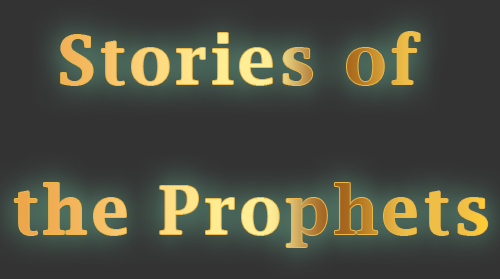
<style>
.page{position:relative;width:500px;height:279px;background:#333333}
.page>*{position:absolute;margin:0}
.t1{font:66px/50px "LucidaBright-Demi";letter-spacing:0.075em}
</style>
<div class="page">
<p class="t1" style="left:14px;top:32px;width:474px;height:215px;text-align:center">Stories of <br><br><br>the Prophets</p>
</div>
